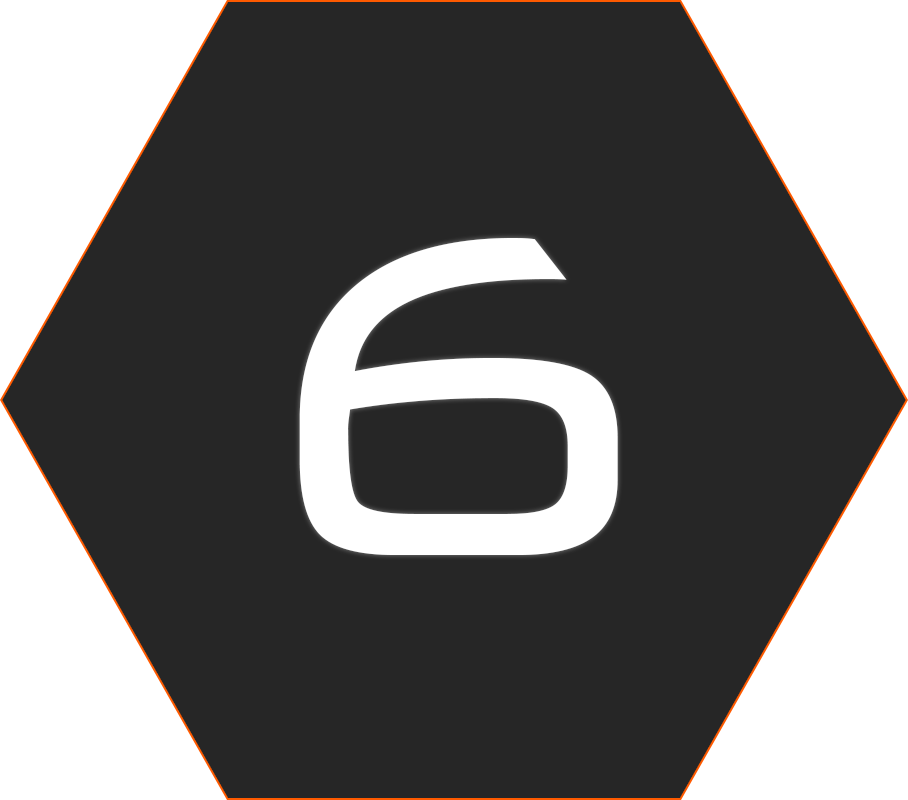
<style>
.page{position:relative;width:908px;height:800px;background:#262626}
.page>*{position:absolute;margin:0}
.t1{font:600px "BankGothicBT-Light";color:#ffffff}
</style>
<div class="page">
<p class="t1" style="left:299px;top:238px;width:319px;height:317px">6</p>
</div>
